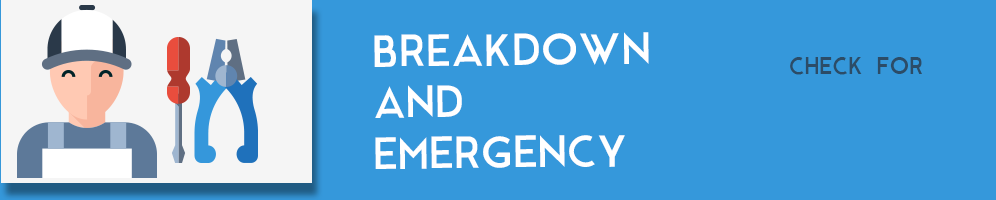
<style>
.page{position:relative;width:996px;height:200px;background:#3598db}
.page>*{position:absolute;margin:0}
.t1{font:10.2px "ModernSans";color:#ffffff;scale:1.04 1}
.t2{font:5.4px "ModernSans";color:#2c4c67;scale:1.04 1}
</style>
<div class="page">
<p class="t1" style="left:374px;top:32px;width:275px;height:137px;rotate:-1deg">BREAKDOWN<br>AND<br>EMERGENCY</p>
<p class="t2" style="left:790px;top:57px;width:132px;height:18px">CHECK FOR</p>
</div>
